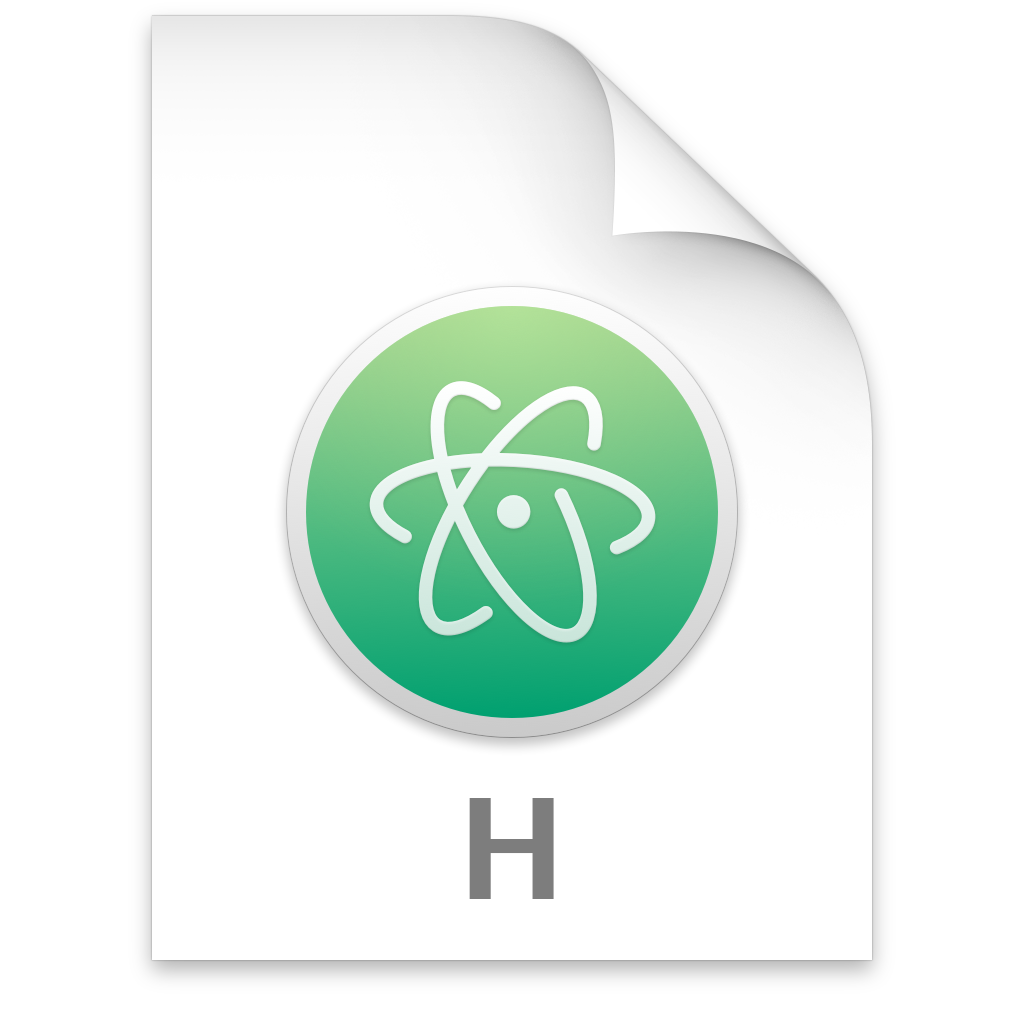
<style>
.page{position:relative;width:1024px;height:1024px;background:#ffffff}
.page>*{position:absolute;margin:0}
.t1{font:140px "LucidaGrande-Bold";color:#7d7d7d}
</style>
<div class="page">
<p class="t1" style="left:469px;top:798px;width:85px;height:101px">H</p>
</div>
